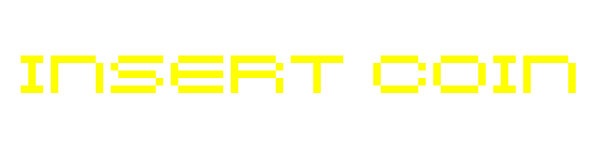
<style>
.page{position:relative;width:600px;height:150px;background:#ffffff}
.page>*{position:absolute;margin:0}
.t1{font:60px "Kenney-Rocket";color:#ffff00}
</style>
<div class="page">
<p class="t1" style="left:20px;top:55px;width:556px;height:38px">INSERT COIN</p>
</div>
